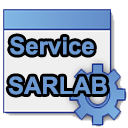
<style>
.page{position:relative;width:128px;height:128px;background:#ffffff}
.page>*{position:absolute;margin:0}
.t1{font:24px "Arial-BoldMT";color:#6c99d1}
</style>
<div class="page">
<p class="t1" style="left:10px;top:36px;width:84px;height:19px">Service</p>
<p class="t1" style="left:8px;top:76px;width:99px;height:19px">SARLAB</p>
</div>
